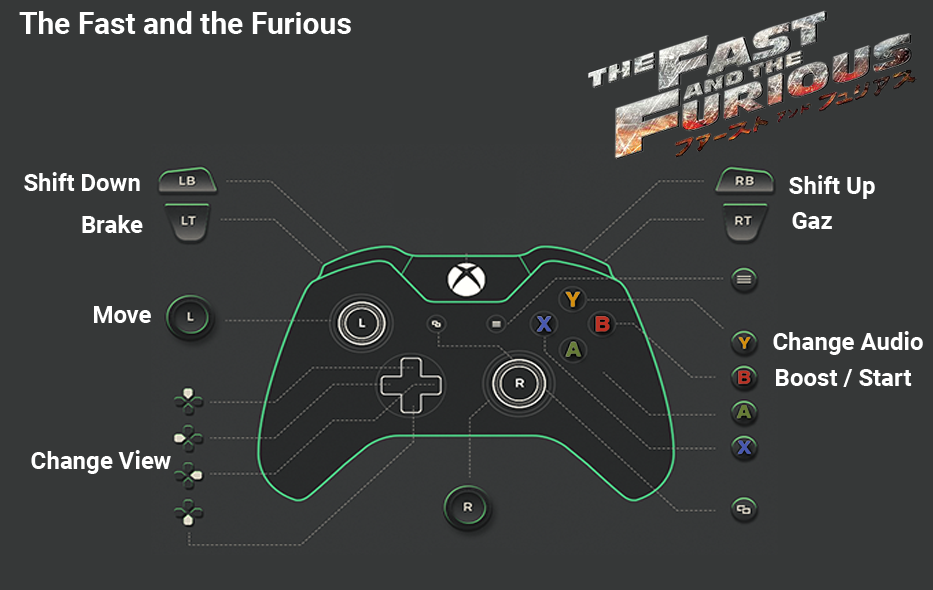
<style>
.page{position:relative;width:933px;height:590px;background:#363838}
.page>*{position:absolute;margin:0}
.t1{font:30px "Roboto-Bold";color:#ffffff}
.t2{font:24px "Roboto-Bold";color:#ffffff}
</style>
<div class="page">
<p class="t1" style="left:19px;top:11px;width:332px;height:23px">The Fast and the Furious</p>
<p class="t2" style="left:24px;top:172px;width:116px;height:19px">Shift Down</p>
<p class="t2" style="left:789px;top:175px;width:86px;height:24px">Shift Up</p>
<p class="t2" style="left:82px;top:215px;width:61px;height:18px">Brake</p>
<p class="t2" style="left:792px;top:212px;width:40px;height:17px">Gaz</p>
<p class="t2" style="left:94px;top:306px;width:57px;height:17px">Move</p>
<p class="t2" style="left:773px;top:331px;width:150px;height:24px">Change Audio</p>
<p class="t2" style="left:776px;top:369px;width:136px;height:18px">Boost / Start</p>
<p class="t2" style="left:31px;top:450px;width:140px;height:24px">Change View</p>
</div>
